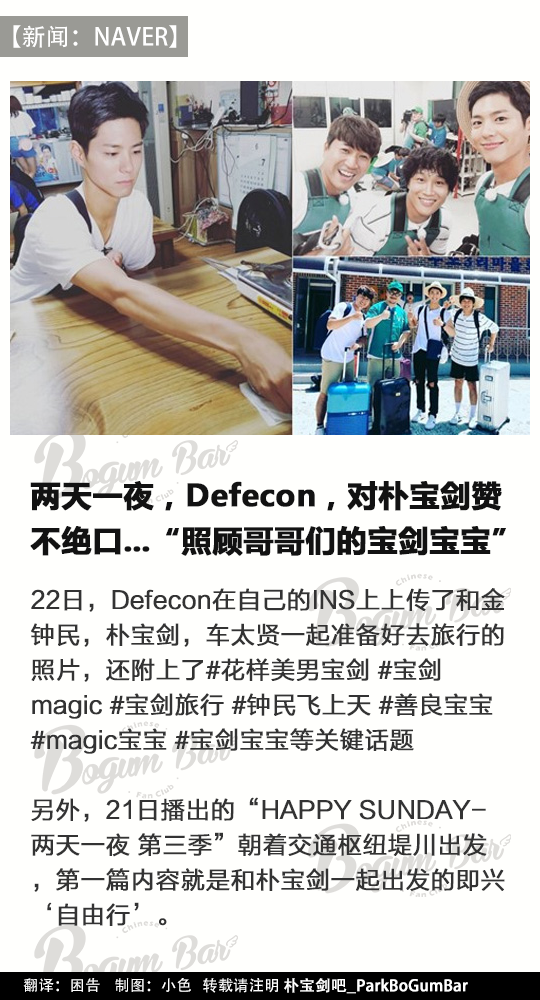
<style>
.page{position:relative;width:540px;height:1000px;background:#fffffd}
.page>*{position:absolute;margin:0}
.t1{font:24px "AdobeHeitiStd-Regular";color:#ffffff}
.t2{font:30px/45px "MicrosoftYaHei-Bold";color:#121212;font-weight:bold}
.t3{font:24px/35px "FZLTHJW--GB1-0";color:#333333;font-weight:bold}
.t4{font:15.4px "AdobeHeitiStd-Regular";color:#ffffff}
.t5{font:15.4px "AdobeHeitiStd-Regular";color:#ffffff;font-weight:bold}
</style>
<div class="page">
<p class="t1" style="left:13px;top:25px;width:164px;height:23px">【新闻：NAVER】</p>
<p class="t2" style="left:30px;top:481px;width:476px;height:75px">两天一夜，Defecon，对朴宝剑赞<br>不绝口...“照顾哥哥们的宝剑宝宝”</p>
<p class="t3" style="left:30px;top:588px;width:475px;height:338px">22日，Defecon在自己的INS上上传了和金钟民，朴宝剑，车太贤一起准备好去旅行的照片，还附上了#花样美男宝剑 #宝剑magic #宝剑旅行 #钟民飞上天 #善良宝宝 #magic宝宝 #宝剑宝宝等关键话题<br><br>另外，21日播出的“HAPPY SUNDAY-两天一夜 第三季”朝着交通枢纽堤川出发，第一篇内容就是和朴宝剑一起出发的即兴‘自由行’。</p>
<p class="t4" style="left:23px;top:978px;width:445px;height:16px">翻译：困告    制图：小色   转载请注明 <span class="t5">朴宝剑吧_ParkBoGumBar</span></p>
</div>
